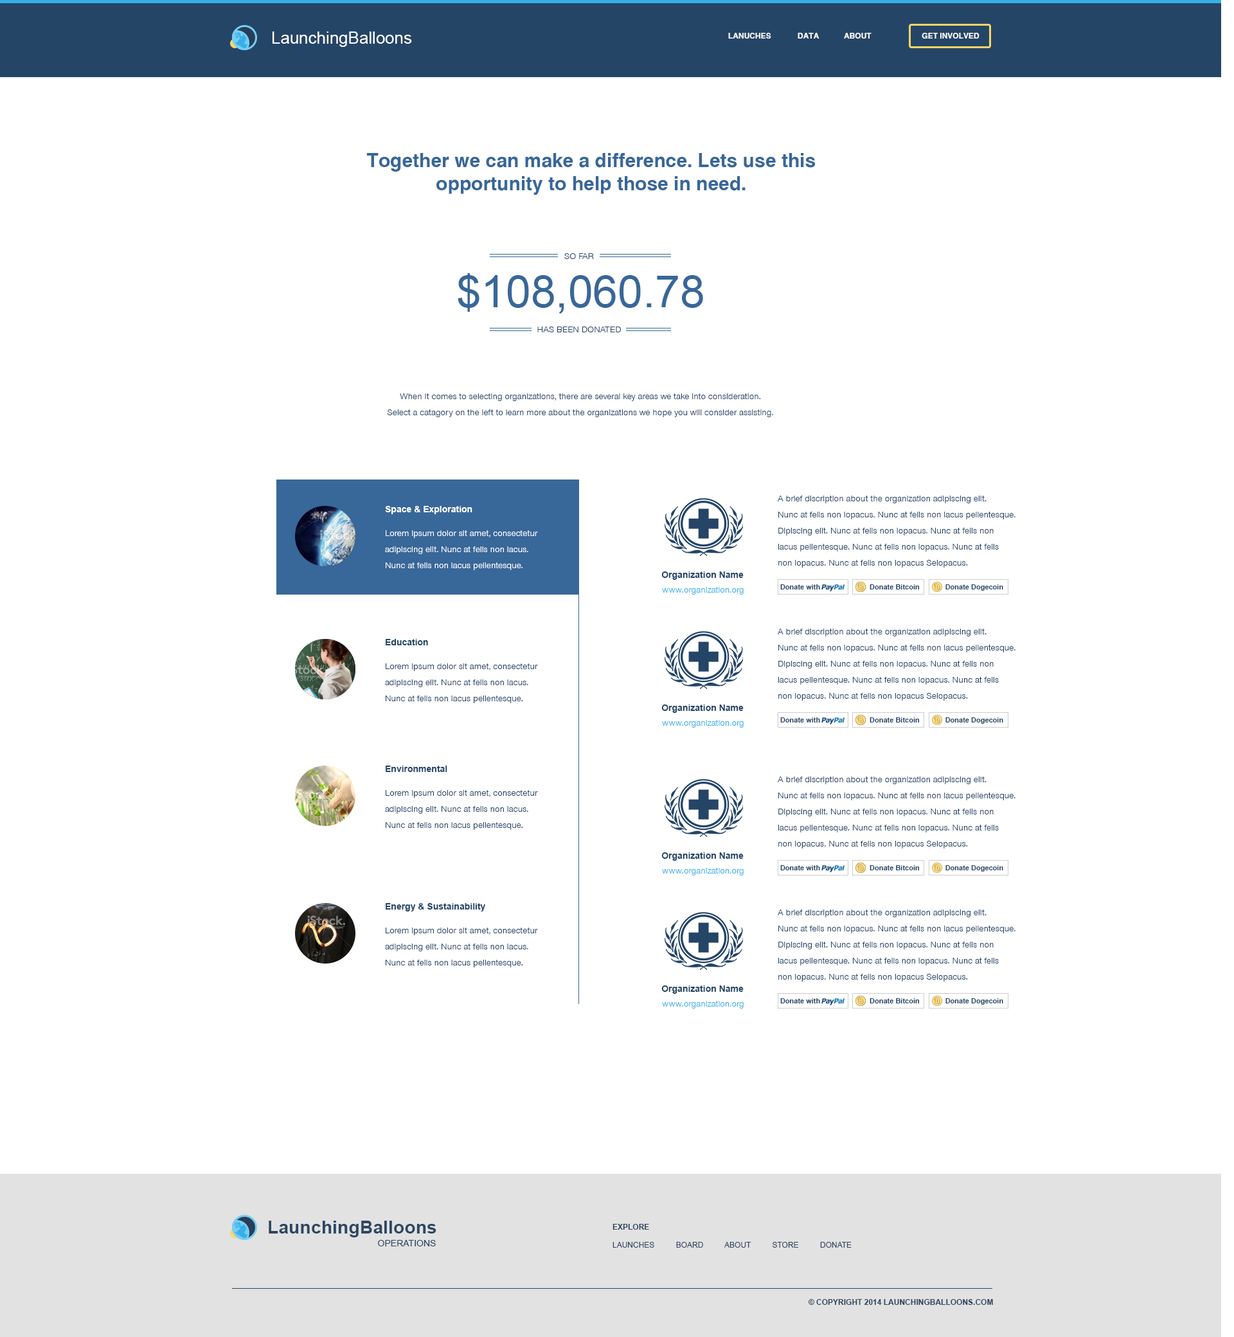
<style>
.page{position:relative;width:1234px;height:1337px;background:#ffffff}
.page>*{position:absolute;margin:0}
.t1{font:16.8px "ArialMT";color:#ffffff}
.t2{font:7.7px "Sans";color:#f9f9f9}
.t3{font:19.3px "Sans";color:#386799}
.t4{font:9px "SansLight";color:#254567}
.t5{font:44.6px "ArialMT";color:#386799}
.t6{font:9px/16.1px "SansLight";color:#254567}
.t7{font:9px "Arial-BoldMT";color:#ffffff}
.t8{font:9px/16.1px "SansLight";color:#ffffff}
.t9{font:9px "Arial-BoldMT";color:#254567}
.t10{font:9px "SansLight";color:#37b0e9}
.t11{font:7.1px "Arial-BoldMT";color:#254567}
.t12{font:7.1px "Elephant-Regular";color:#fbe9ab;scale:0.67 1}
.t13{font:18.2px "Arial-BoldMT";color:#2e4662}
.t14{font:7.7px "Arial-BoldMT";color:#2e4662}
.t15{font:9px "ArialMT";color:#2e4662}
.t16{font:7.7px "ArialMT";color:#2e4662}
</style>
<div class="page">
<p class="t1" style="left:273px;top:32px;width:139px;height:15px">LaunchingBalloons</p>
<p class="t2" style="left:728px;top:33px;width:252px;height:6px">LANUCHES  DATA  ABOUT      GET INVOLVED</p>
<p class="t3" style="left:366px;top:153px;width:450px;height:42px;text-align:center">Together we can make a difference. Lets use this <br>opportunity to help those in need.</p>
<p class="t4" style="left:564px;top:253px;width:30px;height:6px">SO FAR</p>
<p class="t5" style="left:458px;top:273px;width:245px;height:41px">$108,060.78</p>
<p class="t4" style="left:537px;top:327px;width:84px;height:5px">HAS BEEN DONATED</p>
<p class="t6" style="left:387px;top:393px;width:386px;height:24px;text-align:center">When it comes to selecting organizations, there are several key areas we take into consideration. <br>Select a catagory on the left to learn more about the organizations we hope you will consider assisting.</p>
<p class="t6" style="left:778px;top:496px;width:238px;height:72px">A brief discription about the organization adipiscing elit. <br>Nunc at felis non lopacus. Nunc at felis non lacus pellentesque. <br>Dipiscing elit. Nunc at felis non lopacus. Nunc at felis non <br>lacus pellentesque. Nunc at felis non lopacus. Nunc at felis <br>non lopacus. Nunc at felis non lopacus Selopacus.</p>
<p class="t7" style="left:385px;top:506px;width:88px;height:8px">Space &amp; Exploration</p>
<p class="t8" style="left:385px;top:530px;width:153px;height:40px">Lorem ipsum dolor sit amet, consectetur<br>adipiscing elit. Nunc at felis non lacus. <br>Nunc at felis non lacus pellentesque.</p>
<p class="t9" style="left:662px;top:572px;width:82px;height:8px">Organization Name</p>
<p class="t10" style="left:662px;top:587px;width:82px;height:8px">www.organization.org</p>
<p class="t11" style="left:780px;top:584px;width:40px;height:6px">Donate with</p>
<p class="t12" style="left:859px;top:584px;width:4px;height:6px">B</p>
<p class="t11" style="left:870px;top:584px;width:50px;height:6px">Donate Bitcoin</p>
<p class="t12" style="left:935px;top:584px;width:5px;height:6px">D</p>
<p class="t11" style="left:946px;top:584px;width:58px;height:7px">Donate Dogecoin</p>
<p class="t6" style="left:778px;top:629px;width:238px;height:72px">A brief discription about the organization adipiscing elit. <br>Nunc at felis non lopacus. Nunc at felis non lacus pellentesque. <br>Dipiscing elit. Nunc at felis non lopacus. Nunc at felis non <br>lacus pellentesque. Nunc at felis non lopacus. Nunc at felis <br>non lopacus. Nunc at felis non lopacus Selopacus.</p>
<p class="t9" style="left:386px;top:639px;width:42px;height:6px">Education</p>
<p class="t6" style="left:385px;top:663px;width:153px;height:40px">Lorem ipsum dolor sit amet, consectetur<br>adipiscing elit. Nunc at felis non lacus. <br>Nunc at felis non lacus pellentesque.</p>
<p class="t9" style="left:662px;top:705px;width:82px;height:8px">Organization Name</p>
<p class="t10" style="left:662px;top:720px;width:82px;height:8px">www.organization.org</p>
<p class="t11" style="left:780px;top:717px;width:40px;height:6px">Donate with</p>
<p class="t12" style="left:859px;top:717px;width:4px;height:6px">B</p>
<p class="t11" style="left:870px;top:717px;width:50px;height:6px">Donate Bitcoin</p>
<p class="t12" style="left:935px;top:717px;width:5px;height:6px">D</p>
<p class="t11" style="left:946px;top:717px;width:58px;height:7px">Donate Dogecoin</p>
<p class="t9" style="left:386px;top:766px;width:61px;height:6px">Environmental</p>
<p class="t6" style="left:778px;top:777px;width:238px;height:72px">A brief discription about the organization adipiscing elit. <br>Nunc at felis non lopacus. Nunc at felis non lacus pellentesque. <br>Dipiscing elit. Nunc at felis non lopacus. Nunc at felis non <br>lacus pellentesque. Nunc at felis non lopacus. Nunc at felis <br>non lopacus. Nunc at felis non lopacus Selopacus.</p>
<p class="t6" style="left:385px;top:790px;width:153px;height:40px">Lorem ipsum dolor sit amet, consectetur<br>adipiscing elit. Nunc at felis non lacus. <br>Nunc at felis non lacus pellentesque.</p>
<p class="t9" style="left:662px;top:852px;width:82px;height:9px">Organization Name</p>
<p class="t10" style="left:662px;top:868px;width:82px;height:8px">www.organization.org</p>
<p class="t11" style="left:780px;top:865px;width:40px;height:5px">Donate with</p>
<p class="t12" style="left:859px;top:865px;width:4px;height:5px">B</p>
<p class="t11" style="left:870px;top:865px;width:50px;height:5px">Donate Bitcoin</p>
<p class="t12" style="left:935px;top:865px;width:5px;height:5px">D</p>
<p class="t11" style="left:946px;top:865px;width:58px;height:7px">Donate Dogecoin</p>
<p class="t9" style="left:386px;top:903px;width:99px;height:9px">Energy &amp; Sustainability</p>
<p class="t6" style="left:778px;top:910px;width:238px;height:72px">A brief discription about the organization adipiscing elit. <br>Nunc at felis non lopacus. Nunc at felis non lacus pellentesque. <br>Dipiscing elit. Nunc at felis non lopacus. Nunc at felis non <br>lacus pellentesque. Nunc at felis non lopacus. Nunc at felis <br>non lopacus. Nunc at felis non lopacus Selopacus.</p>
<p class="t6" style="left:385px;top:928px;width:153px;height:40px">Lorem ipsum dolor sit amet, consectetur<br>adipiscing elit. Nunc at felis non lacus. <br>Nunc at felis non lacus pellentesque.</p>
<p class="t9" style="left:662px;top:986px;width:82px;height:8px">Organization Name</p>
<p class="t10" style="left:662px;top:1001px;width:82px;height:8px">www.organization.org</p>
<p class="t11" style="left:780px;top:998px;width:40px;height:6px">Donate with</p>
<p class="t12" style="left:859px;top:998px;width:4px;height:6px">B</p>
<p class="t11" style="left:870px;top:998px;width:50px;height:6px">Donate Bitcoin</p>
<p class="t12" style="left:935px;top:998px;width:5px;height:6px">D</p>
<p class="t11" style="left:946px;top:998px;width:58px;height:7px">Donate Dogecoin</p>
<p class="t13" style="left:269px;top:1221px;width:168px;height:17px">LaunchingBalloons</p>
<p class="t14" style="left:613px;top:1224px;width:36px;height:6px">EXPLORE</p>
<p class="t15" style="left:378px;top:1240px;width:58px;height:6px">OPERATIONS</p>
<p class="t16" style="left:613px;top:1242px;width:239px;height:6px">LAUNCHES          BOARD          ABOUT          STORE          DONATE</p>
<p class="t14" style="left:808px;top:1299px;width:185px;height:6px">© COPYRIGHT 2014 LAUNCHINGBALLOONS.COM</p>
</div>
